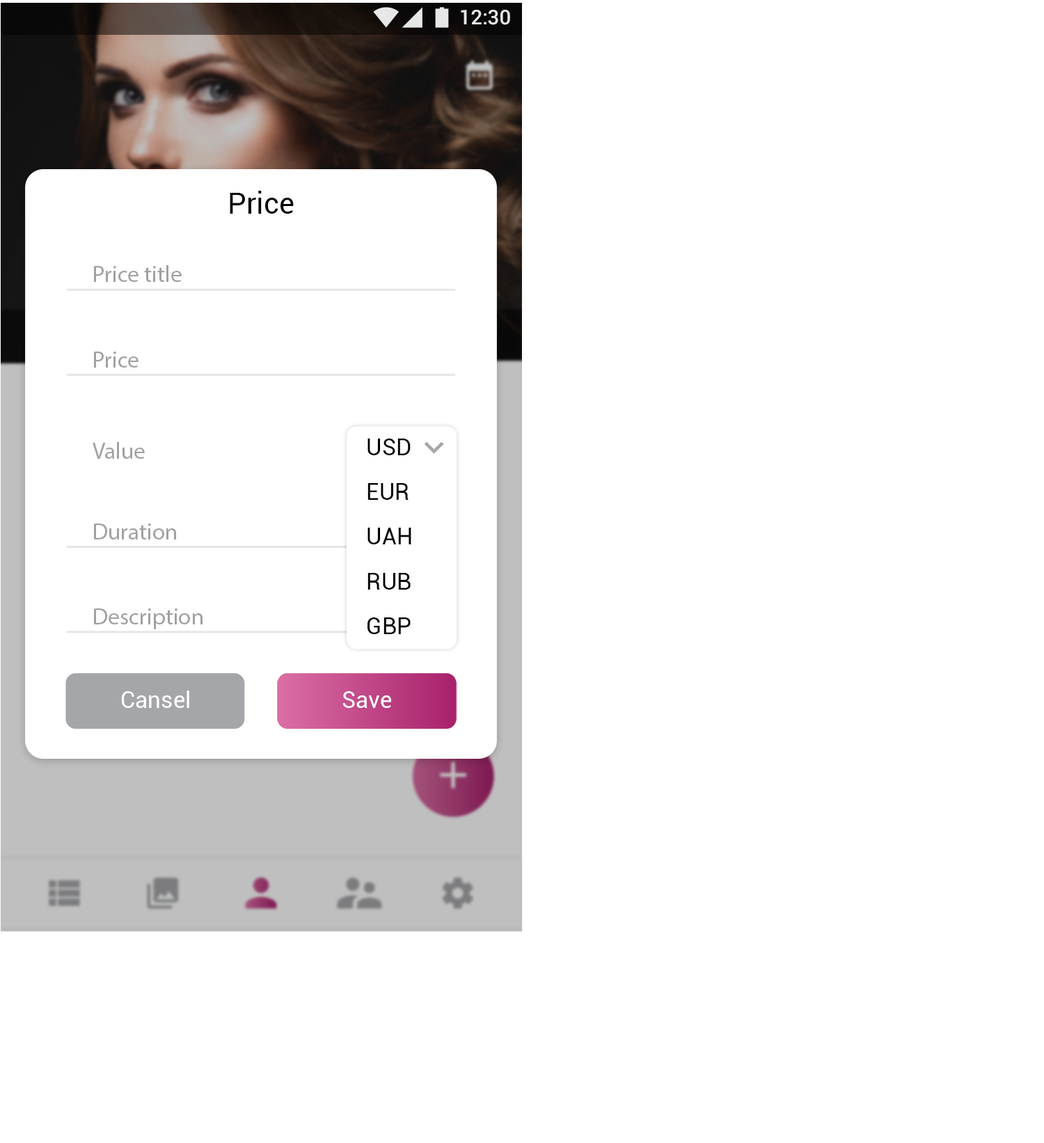
<style>
.page{position:relative;width:1044px;height:1143px;background:#ffffff}
.page>*{position:absolute;margin:0}
.t1{font:20.3px "Roboto-Medium";color:#ffffff}
.t2{font:29px "Roboto-Regular";color:#000000}
.t3{font:23.2px "MyriadPro-Regular";color:#a1a1a1}
.t4{font:23.2px "Roboto-Regular";color:#000000}
.t5{font:23.2px "Roboto-Regular";color:#ffffff}
</style>
<div class="page">
<p class="t1" style="left:461px;top:10px;width:49px;height:15px">12:30</p>
<p class="t2" style="left:230px;top:191px;width:64px;height:23px">Price</p>
<p class="t3" style="left:94px;top:265px;width:88px;height:17px">Price title</p>
<p class="t3" style="left:94px;top:351px;width:44px;height:16px">Price</p>
<p class="t3" style="left:93px;top:442px;width:52px;height:17px">Value</p>
<p class="t4" style="left:367px;top:438px;width:44px;height:17px">USD</p>
<p class="t4" style="left:367px;top:483px;width:41px;height:17px">EUR</p>
<p class="t3" style="left:94px;top:523px;width:82px;height:16px">Duration</p>
<p class="t4" style="left:367px;top:527px;width:44px;height:17px">UAH</p>
<p class="t4" style="left:367px;top:573px;width:44px;height:16px">RUB</p>
<p class="t3" style="left:94px;top:608px;width:108px;height:21px">Description</p>
<p class="t4" style="left:367px;top:617px;width:44px;height:17px">GBP</p>
<p class="t5" style="left:121px;top:690px;width:68px;height:18px">Cansel</p>
<p class="t5" style="left:342px;top:691px;width:49px;height:17px">Save</p>
</div>
